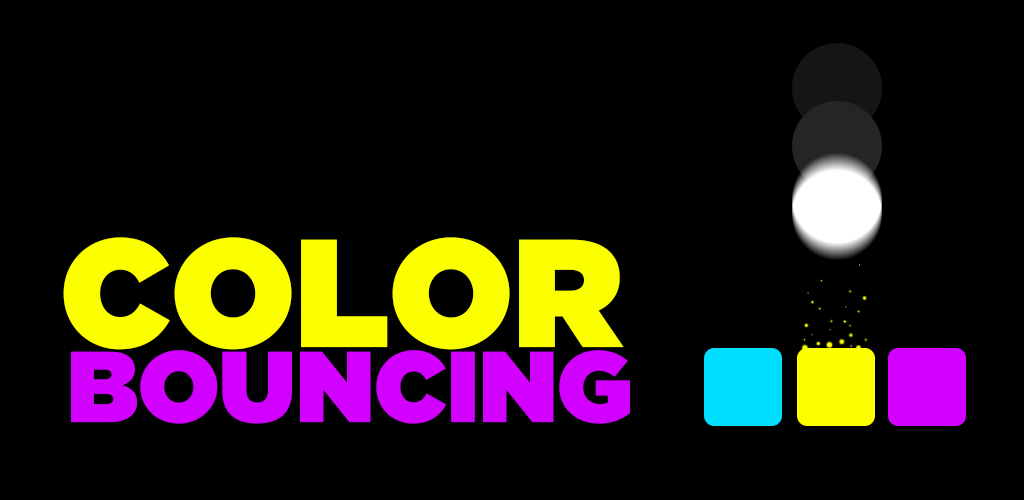
<style>
.page{position:relative;width:1024px;height:500px;background:#000000}
.page>*{position:absolute;margin:0}
.t1{font:153.2px "Gotham-Ultra";color:#fcff00}
.t2{font:100.3px "Gotham-Ultra";color:#d200ff}
</style>
<div class="page">
<p class="t1" style="left:63px;top:237px;width:561px;height:113px">COLOR</p>
<p class="t2" style="left:71px;top:350px;width:559px;height:74px">BOUNCING</p>
</div>
